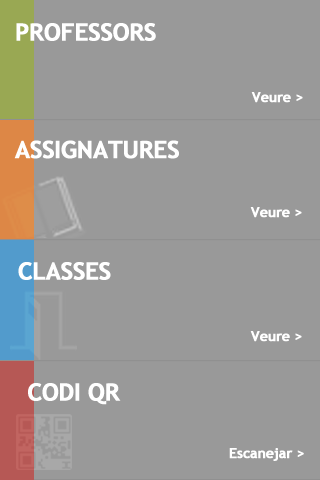
<style>
.page{position:relative;width:320px;height:480px;background:#999999}
.page>*{position:absolute;margin:0}
.t1{font:24px "TrebuchetMS-Bold";letter-spacing:-0.03em;color:#ffffff;font-weight:bold}
.t2{font:14px "TrebuchetMS-Bold";letter-spacing:-0.03em;color:#ffffff;font-weight:bold}
</style>
<div class="page">
<p class="t1" style="left:16px;top:23px;width:140px;height:18px">PROFESSORS</p>
<p class="t2" style="left:251px;top:92px;width:52px;height:11px">Veure &gt;</p>
<p class="t1" style="left:14px;top:140px;width:165px;height:19px">ASSIGNATURES</p>
<p class="t2" style="left:250px;top:207px;width:52px;height:11px">Veure &gt;</p>
<p class="t1" style="left:18px;top:262px;width:93px;height:18px">CLASSES</p>
<p class="t2" style="left:250px;top:331px;width:52px;height:11px">Veure &gt;</p>
<p class="t1" style="left:28px;top:383px;width:93px;height:22px">CODI QR</p>
<p class="t2" style="left:229px;top:448px;width:75px;height:13px">Escanejar &gt;</p>
</div>
